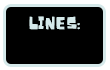
<style>
.page{position:relative;width:110px;height:70px;background:#000000}
.page>*{position:absolute;margin:0}
.t1{font:16.7px "Noot";color:#d5e9ea}
</style>
<div class="page">
<p class="t1" style="left:29px;top:16px;width:51px;height:14px">:LINES</p>
</div>
